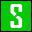
<style>
.page{position:relative;width:32px;height:32px;background:#03c803}
.page>*{position:absolute;margin:0}
.t1{font:32px "AgencyFB-Bold";letter-spacing:0.04em;color:#ffffff}
</style>
<div class="page">
<p class="t1" style="left:10px;top:4px;width:13px;height:24px">S</p>
</div>
